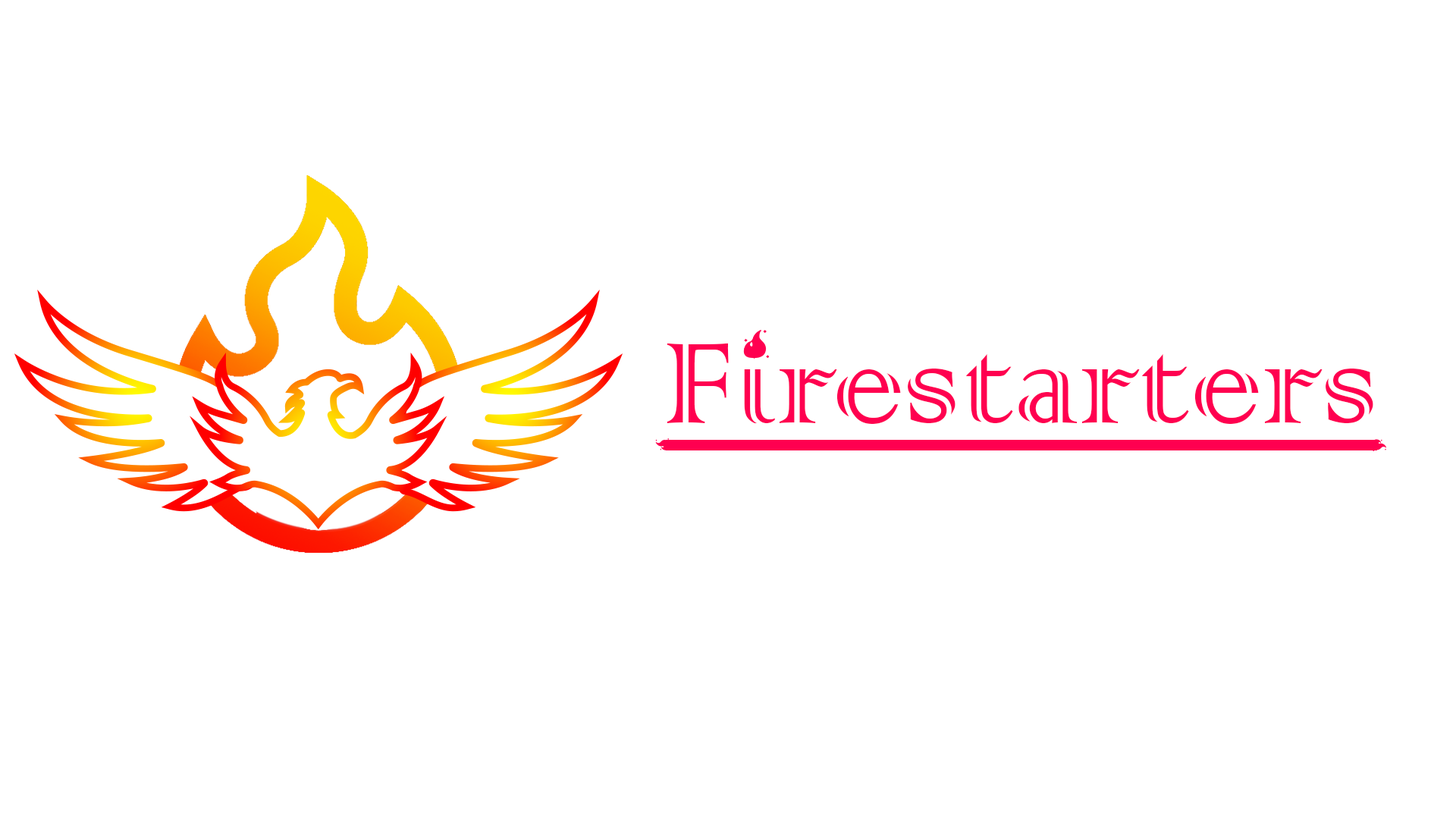
<style>
.page{position:relative;width:1456px;height:819px;background:#ffffff}
.page>*{position:absolute;margin:0}
.t1{font:151.7px "ColonnaMT";color:#ff0050}
</style>
<div class="page">
<p class="t1" style="left:667px;top:337px;width:706px;height:87px">Firestarters</p>
</div>
